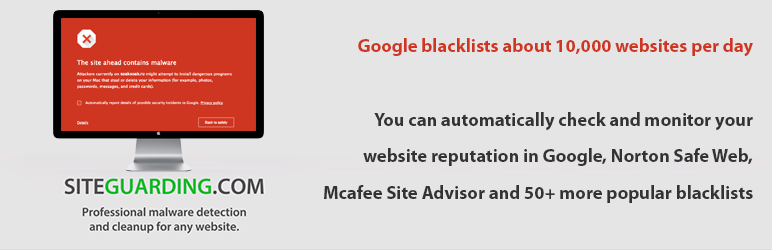
<style>
.page{position:relative;width:772px;height:250px;background:#e6e5e6}
.page>*{position:absolute;margin:0}
.t1{font:18.5px/36.8px "MyriadPro-Bold";color:#333333}
.t2{font:18.5px/36.8px "MyriadPro-Bold";color:#cf3622}
</style>
<div class="page">
<p class="t1" style="left:324px;top:38px;width:429px;height:165px;text-align:right"><span class="t2">Google blacklists about 10,000 websites per day<br></span><br>You can automatically check and monitor your<br>website reputation in Google, Norton Safe Web,<br>Mcafee Site Advisor and 50+ more popular blacklists</p>
</div>
